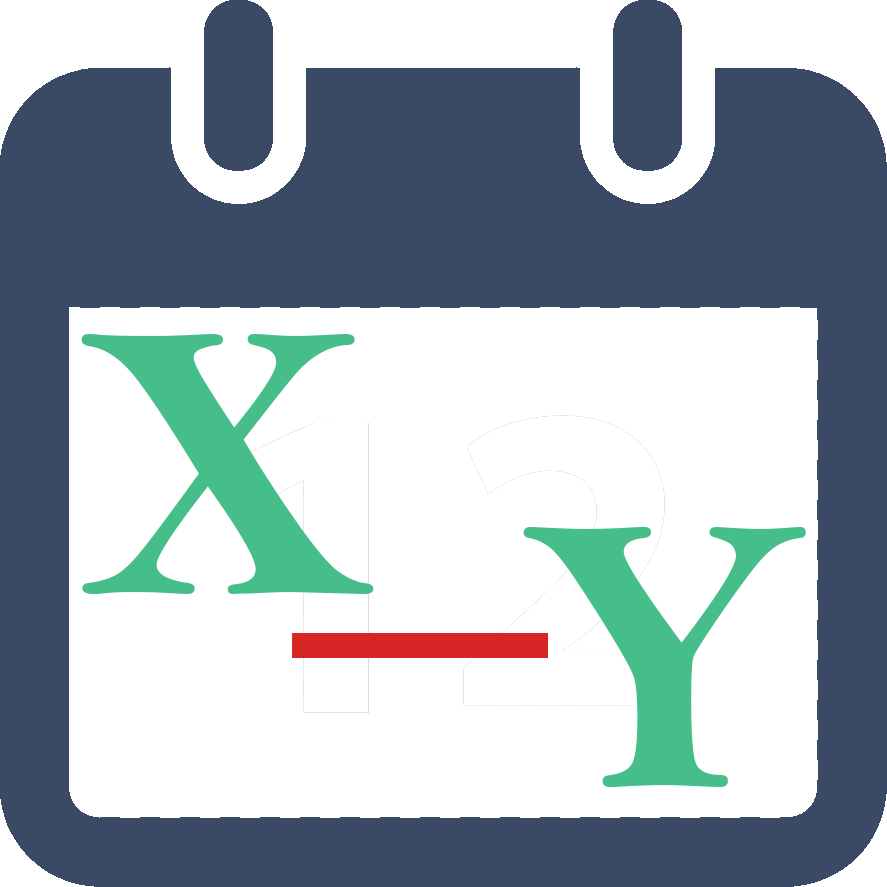
<style>
.page{position:relative;width:887px;height:887px;background:#ffffff}
.page>*{position:absolute;margin:0}
.t1{font:400px "BellMTBold";color:#46be8a}
</style>
<div class="page">
<p class="t1" style="left:81px;top:334px;width:293px;height:260px">X</p>
<p class="t1" style="left:523px;top:527px;width:283px;height:260px">Y</p>
</div>
